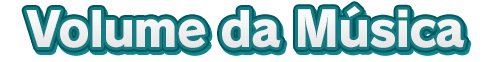
<style>
.page{position:relative;width:488px;height:62px;background:#ffffff}
.page>*{position:absolute;margin:0}
.t1{font:48px "RodinPro-EB";letter-spacing:-0.031em;color:#efefef}
</style>
<div class="page">
<p class="t1" style="left:26px;top:6px;width:439px;height:42px">Volume da Música</p>
</div>
